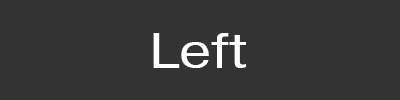
<style>
.page{position:relative;width:400px;height:100px;background:#333333}
.page>*{position:absolute;margin:0}
.t1{font:48px "Helvetica";color:#ffffff;scale:1.2 1}
</style>
<div class="page">
<p class="t1" style="left:153px;top:33px;width:93px;height:35px">Left</p>
</div>
